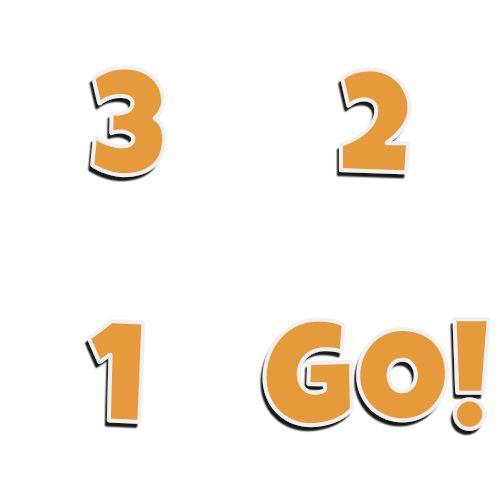
<style>
.page{position:relative;width:500px;height:500px;background:#ffffff}
.page>*{position:absolute;margin:0}
.t1{font:142.9px "LuckiestGuy-Regular";letter-spacing:0.02em;color:#e59b3b;text-transform:uppercase}
</style>
<div class="page">
<p class="t1" style="left:92px;top:67px;width:73px;height:109px">3</p>
<p class="t1" style="left:340px;top:69px;width:70px;height:104px">2</p>
<p class="t1" style="left:88px;top:321px;width:56px;height:101px">1</p>
<p class="t1" style="left:264px;top:319px;width:225px;height:110px">GO!</p>
</div>
